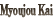
<style>
.page{position:relative;width:54px;height:18px;background:#ffffff}
.page>*{position:absolute;margin:0}
.t1{font:14px "RyuminPro-ExBold";letter-spacing:-0.08em;color:#4a3f32;font-weight:bold;scale:0.66 1}
</style>
<div class="page">
<p class="t1" style="left:0px;top:4px;width:53px;height:14px">Myoujou Kai</p>
</div>
